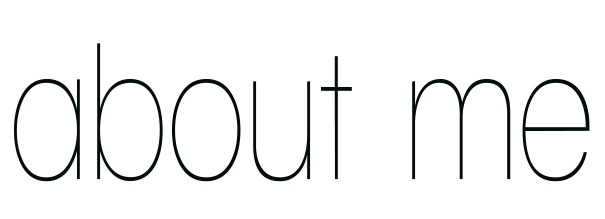
<style>
.page{position:relative;width:605px;height:219px;background:#ffffff}
.page>*{position:absolute;margin:0}
.t1{font:200px "WalkwayCondensed";color:#020e06}
</style>
<div class="page">
<p class="t1" style="left:14px;top:43px;width:576px;height:139px">about me</p>
</div>
